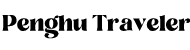
<style>
.page{position:relative;width:190px;height:50px;background:#ffffff}
.page>*{position:absolute;margin:0}
.t1{font:22px "LostaMasta-Bold";color:#000000}
</style>
<div class="page">
<p class="t1" style="left:2px;top:15px;width:189px;height:24px">Penghu Traveler</p>
</div>
